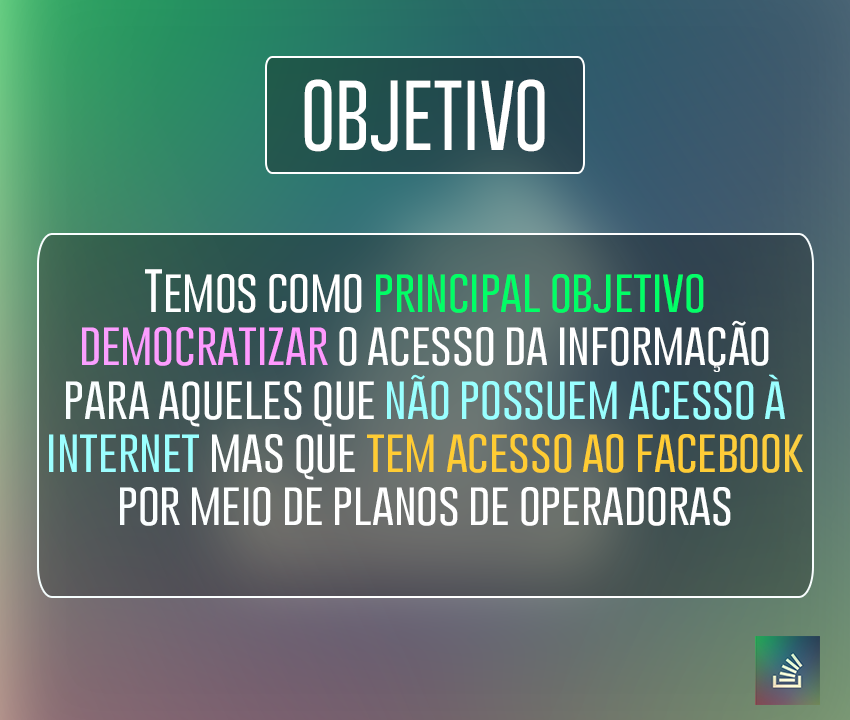
<style>
.page{position:relative;width:850px;height:720px}
.page>*{position:absolute;margin:0}
.t1{font:72.2px "GoboldThinLight";color:#ffffff}
.t2{font:44.5px "GoboldThinLight";color:#ffffff}
.t3{font:44.5px "GoboldThinLight";color:#00ff66}
.t4{font:44.5px "GoboldThinLight";color:#ff99ff}
.t5{font:44.5px "GoboldThinLight";color:#99ffff}
.t6{font:44.5px "GoboldThinLight";color:#ffcc33}
</style>
<div class="page">
<p class="t1" style="left:304px;top:79px;width:241px;height:73px">OBJETIVO</p>
<p class="t2" style="left:49px;top:269px;width:754px;height:257px;text-align:center">Temos como <span class="t3">principal objetivo<br></span><span class="t4">democratizar </span>o acesso da informação<br>para aqueles que <span class="t5">não possuem acesso à<br>internet</span> mas que <span class="t6">tem acesso ao facebook<br></span>por meio de planos de operadoras</p>
</div>
